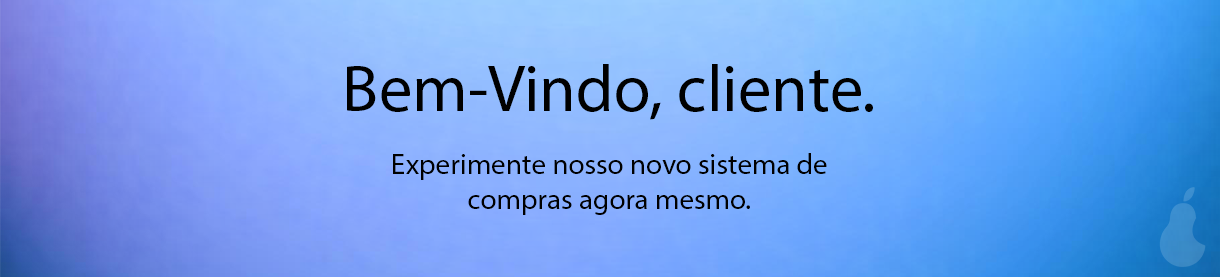
<style>
.page{position:relative;width:1220px;height:277px}
.page>*{position:absolute;margin:0}
.t1{font:66.7px "MyriadPro-Regular";color:#000000}
.t2{font:29.2px "MyriadPro-Regular";color:#000000}
</style>
<div class="page">
<p class="t1" style="left:347px;top:64px;width:526px;height:56px">Bem-Vindo, cliente.</p>
<p class="t2" style="left:393px;top:153px;width:434px;height:62px;text-align:center">Experimente nosso novo sistema de<br>compras agora mesmo.</p>
</div>
